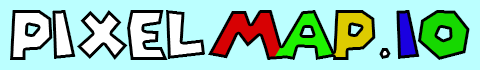
<style>
.page{position:relative;width:480px;height:70px;background:#bbffff}
.page>*{position:absolute;margin:0}
.t1{font:66.7px "SuperMarioGalaxy"}
</style>
<div class="page">
<p class="t1" style="left:10px;top:10px;width:460px;height:50px">PiXelMap.io</p>
</div>
